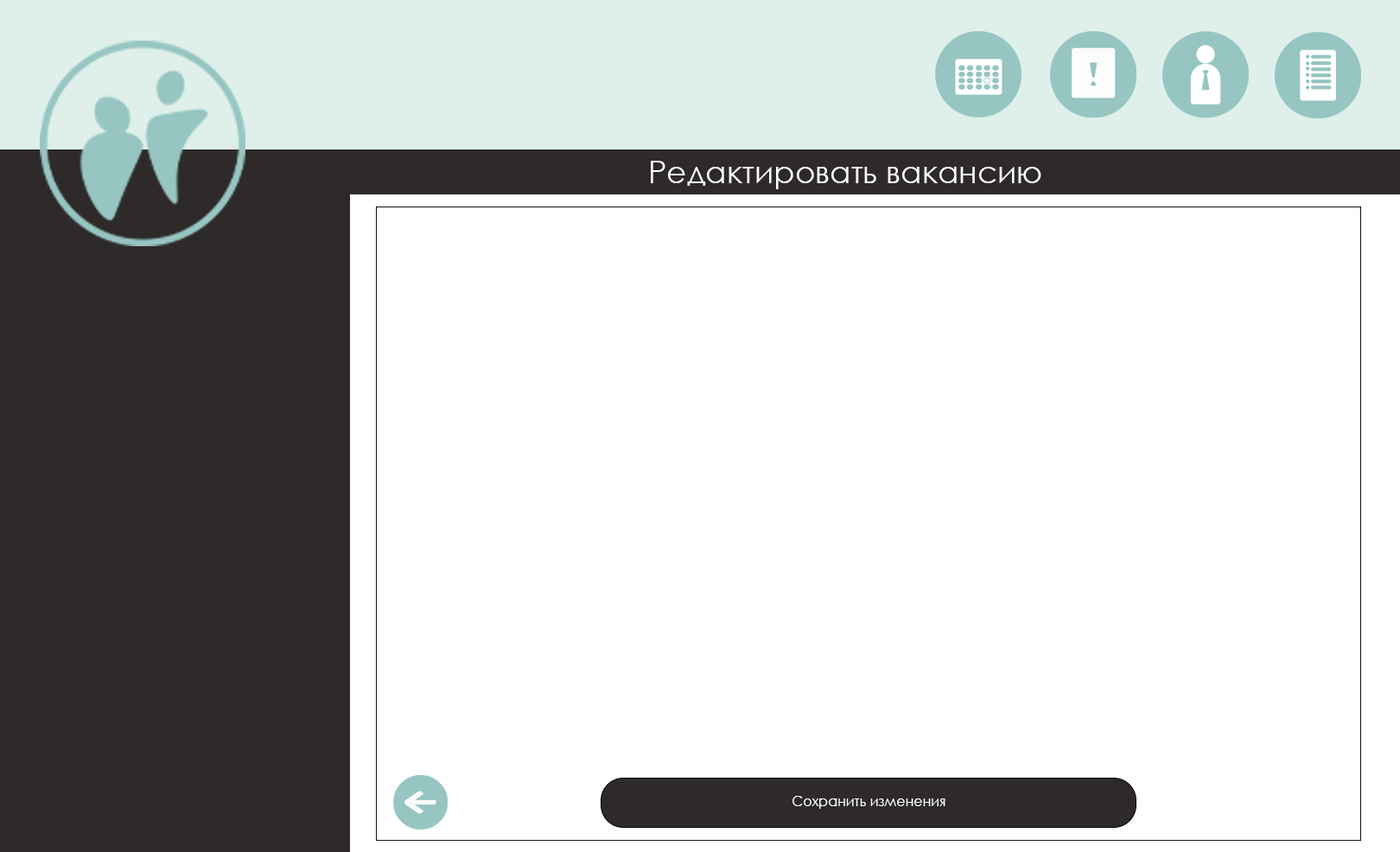
<style>
.page{position:relative;width:1400px;height:852px;background:#ffffff}
.page>*{position:absolute;margin:0}
.t1{font:31.1px "CenturyGothic";color:#ffffff}
.t2{font:13.8px "CenturyGothic";color:#ffffff}
</style>
<div class="page">
<p class="t1" style="left:651px;top:161px;width:390px;height:28px">Редактировать вакансию</p>
<p class="t2" style="left:792px;top:796px;width:153px;height:13px">Сохранить изменения</p>
</div>
